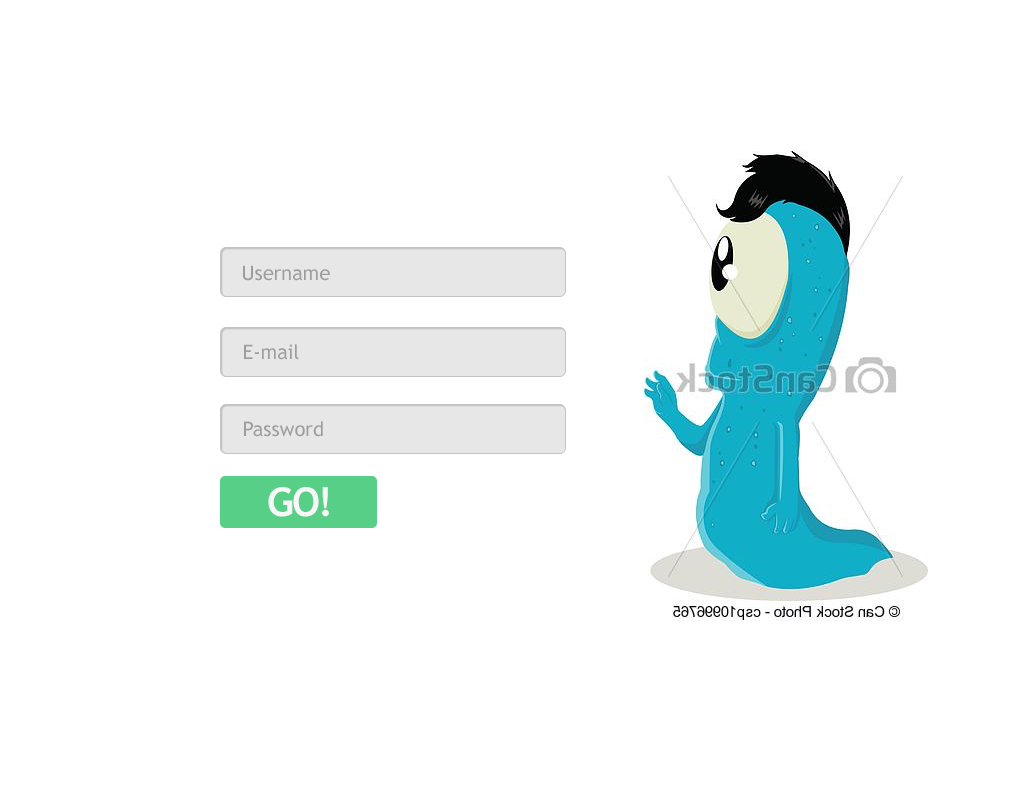
<style>
.page{position:relative;width:1024px;height:800px;background:#ffffff}
.page>*{position:absolute;margin:0}
.t1{font:20px "TrebuchetMS";color:#9d9d9d}
.t2{font:40px "TrebuchetMS-Bold";letter-spacing:-0.05em;color:#f7f7f7}
</style>
<div class="page">
<p class="t1" style="left:243px;top:265px;width:87px;height:16px">Username</p>
<p class="t1" style="left:244px;top:344px;width:55px;height:16px">E-mail</p>
<p class="t1" style="left:244px;top:421px;width:79px;height:16px">Password</p>
<p class="t2" style="left:268px;top:487px;width:61px;height:30px">GO!</p>
</div>
